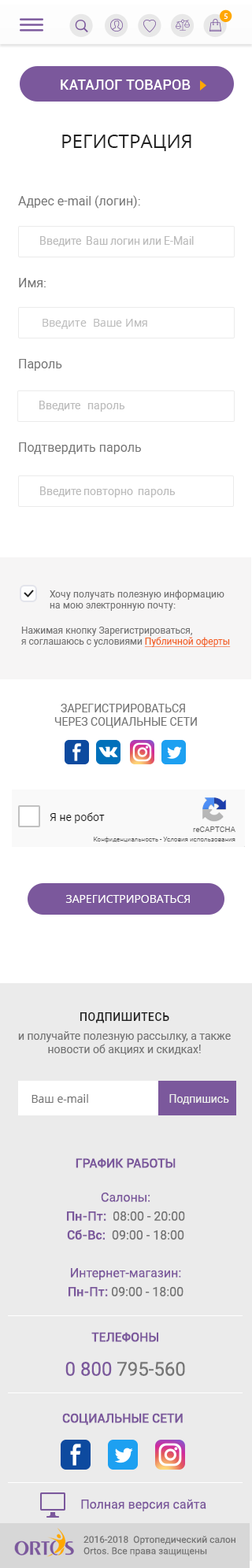
<style>
.page{position:relative;width:252px;height:1568px;background:#ffffff}
.page>*{position:absolute;margin:0}
.t1{font:8px "MyriadPro-Regular";letter-spacing:0.1em;color:#ffffff;text-transform:uppercase}
.t2{font:14.2px "Roboto-Medium";letter-spacing:0.01em;color:#ffffff;text-transform:uppercase}
.t3{font:18.9px "OpenSans";color:#212121;text-transform:uppercase}
.t4{font:12.6px "Roboto-Regular";color:#757575}
.t5{font:11px "Roboto-Regular";color:#bdbdbd}
.t6{font:11px "OpenSans";color:#bdbdbd}
.t7{font:9.4px "Roboto-Regular";color:#757575}
.t8{font:9.4px "Roboto-Regular";color:#f26022;text-decoration:underline}
.t9{font:11px "Roboto-Regular";color:#757575;text-transform:uppercase}
.t10{font:11px "OpenSans";color:#ffffff;text-transform:uppercase}
.t11{font:11px/18.9px "Roboto-Regular";color:#757575}
.t12{font:11px "Roboto-Medium";letter-spacing:0.05em;color:#212121;text-transform:uppercase}
.t13{font:11px "Roboto-Regular";color:#757575}
.t14{font:11px "OpenSans";color:#757575}
.t15{font:11px "Roboto-Regular";color:#ebebeb}
.t16{font:12.6px/18.9px "Roboto-Regular";color:#7b589c}
.t17{font:12.6px "Roboto-Medium";color:#7b589c;text-transform:uppercase}
.t18{font:12.6px/18.9px "Roboto-Medium";color:#7b589c}
.t19{font:12.6px/18.9px "Roboto-Regular";color:#757575}
.t20{font:18.9px/18.9px "Roboto-Regular";color:#7b589c}
.t21{font:18.9px/18.9px "Roboto-Regular";color:#757575}
.t22{font:12.6px "Roboto-Regular";color:#7b589c}
</style>
<div class="page">
<p class="t1" style="left:224px;top:13px;width:3px;height:6px">5</p>
<p class="t2" style="left:61px;top:80px;width:129px;height:10px">Каталог товаров</p>
<p class="t3" style="left:62px;top:135px;width:129px;height:16px">Регистрация</p>
<p class="t4" style="left:18px;top:195px;width:122px;height:14px">Адрес e-mail (логин):</p>
<p class="t5" style="left:40px;top:236px;width:154px;height:10px">Введите  Ваш логин или E-Mail</p>
<p class="t4" style="left:19px;top:278px;width:27px;height:9px">Имя:</p>
<p class="t6" style="left:43px;top:319px;width:104px;height:10px">Введите  Ваше Имя</p>
<p class="t4" style="left:19px;top:359px;width:43px;height:12px">Пароль</p>
<p class="t5" style="left:39px;top:401px;width:86px;height:11px">Введите   пароль</p>
<p class="t4" style="left:19px;top:442px;width:122px;height:12px">Подтвердить пароль</p>
<p class="t5" style="left:40px;top:486px;width:136px;height:11px">Введите повторно  пароль</p>
<p class="t7" style="left:50px;top:590px;width:174px;height:21px">Хочу получать полезную информацию <br>на мою электронную почту:</p>
<p class="t7" style="left:21px;top:627px;width:210px;height:20px">Нажимая кнопку Зарегистрироваться,<br>я соглашаюсь с условиями <span class="t8">Публичной оферты</span></p>
<p class="t9" style="left:54px;top:704px;width:143px;height:24px;text-align:center">Зарегистрироваться  <br>через социальные сети</p>
<p class="t10" style="left:65px;top:895px;width:125px;height:8px">ЗАрегистрироваться</p>
<p class="t11" style="left:18px;top:1012px;width:213px;height:43px;text-align:center"><span class="t12">Подпишитесь <br></span>и получайте полезную рассылку, а также <span class="t13">новости об акциях и скидках!</span></p>
<p class="t14" style="left:31px;top:1094px;width:57px;height:9px">Ваш e-mail</p>
<p class="t15" style="left:169px;top:1094px;width:60px;height:10px">Подпишись</p>
<p class="t16" style="left:67px;top:1158px;width:118px;height:138px;text-align:center"><span class="t17">График работы<br><br></span>Салоны: <br><span class="t18">Пн-Пт:</span><span class="t19">  08:00 - 20:00 <br></span><span class="t18">Сб-Вс:</span><span class="t19">  09:00 - 18:00<br><br></span>Интернет-магазин:<br><span class="t18">Пн-Пт:</span><span class="t19"> 09:00 - 18:00</span></p>
<p class="t17" style="left:65px;top:1332px;width:120px;height:44px;text-align:center">Телефоны<br><br><span class="t20">0 800 </span><span class="t21">795-560</span></p>
<p class="t17" style="left:62px;top:1413px;width:121px;height:13px">Социальные сети</p>
<p class="t22" style="left:81px;top:1499px;width:125px;height:12px">Полная версия сайта</p>
<p class="t7" style="left:83px;top:1536px;width:152px;height:20px">2016-2018  Ортопедический салон Ortos. Все права защищены</p>
</div>
